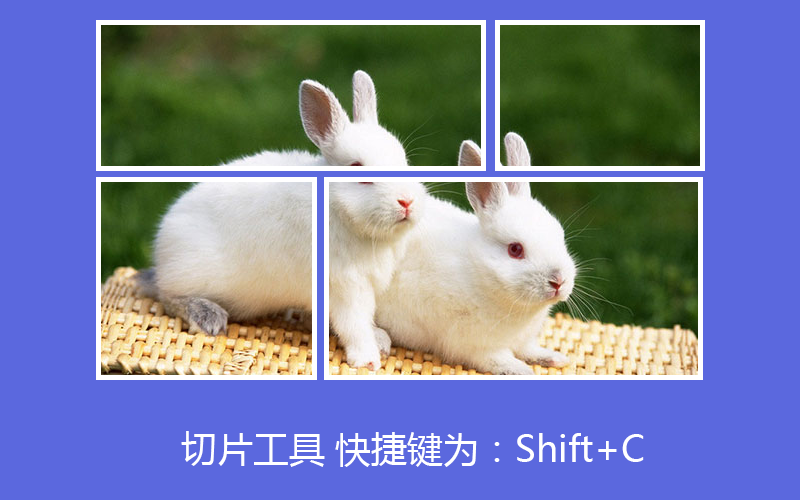
<style>
.page{position:relative;width:800px;height:500px;background:#5b68de}
.page>*{position:absolute;margin:0}
.t1{font:36px "MicrosoftYaHei";color:#ffffff}
</style>
<div class="page">
<p class="t1" style="left:181px;top:431px;width:463px;height:36px">切片工具 快捷键为：Shift+C</p>
</div>
